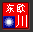
<style>
.page{position:relative;width:33px;height:32px;background:#f20000}
.page>*{position:absolute;margin:0}
.t1{font:10.4px "SimSun";color:#ffffff}
.t2{font:11.7px "SimSun";color:#ffffff}
</style>
<div class="page">
<p class="t1" style="left:6px;top:4px;width:19px;height:9px">东欧</p>
<p class="t2" style="left:16px;top:15px;width:11px;height:12px">川</p>
</div>
